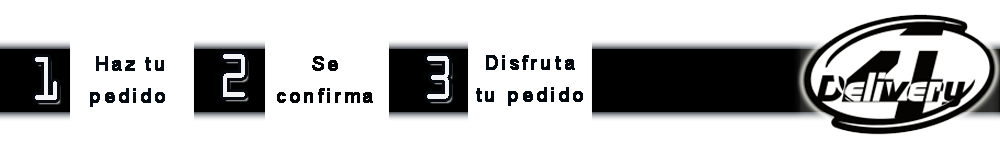
<style>
.page{position:relative;width:1000px;height:154px;background:#ffffff}
.page>*{position:absolute;margin:0}
.t1{font:66px "OCRAExtended";letter-spacing:0.06em;color:#f2f4f6;scale:0.8 1}
.t2{font:19.2px/32.5px "ArialMT";letter-spacing:0.1em;color:#060c14;font-weight:bold}
.t3{font:19.2px/32.5px "ArialMT";letter-spacing:0.1em;color:#020406;font-weight:bold}
.t4{font:19.2px/32.5px "ArialMT";letter-spacing:0.1em;color:#020810;font-weight:bold}
</style>
<div class="page">
<p class="t1" style="left:223px;top:54px;width:22px;height:43px">2</p>
<p class="t1" style="left:35px;top:57px;width:22px;height:43px">1</p>
<p class="t2" style="left:90px;top:56px;width:75px;height:51px;text-align:right">Haz tu<br>pedido</p>
<p class="t3" style="left:277px;top:56px;width:96px;height:47px;text-align:center">Se<br>confirma</p>
<p class="t1" style="left:427px;top:56px;width:22px;height:43px">3</p>
<p class="t4" style="left:476px;top:55px;width:107px;height:51px;text-align:center">Disfruta<br>tu pedido</p>
</div>
